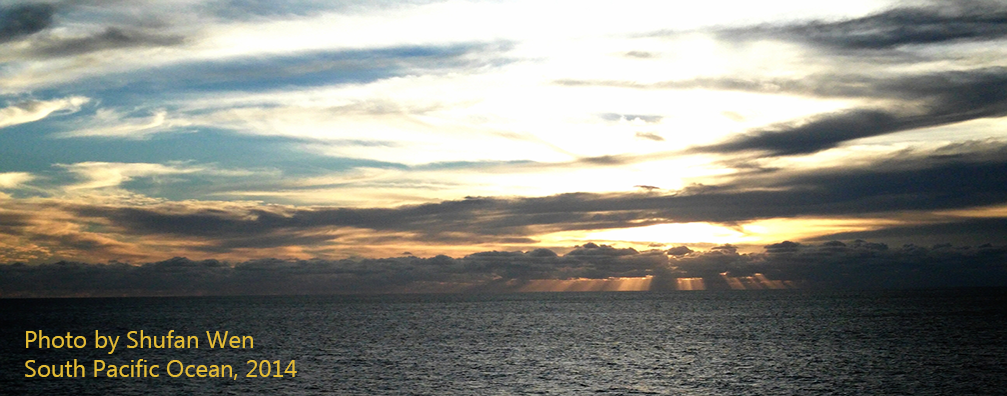
<style>
.page{position:relative;width:1007px;height:396px}
.page>*{position:absolute;margin:0}
.t1{font:24px "MicrosoftTaiLe";color:#e3bc35}
</style>
<div class="page">
<p class="t1" style="left:25px;top:330px;width:272px;height:50px">Photo by Shufan Wen<br>South Pacific Ocean, 2014</p>
</div>
